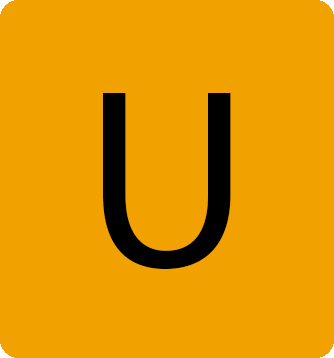
<style>
.page{position:relative;width:334px;height:358px;background:#f1a201}
.page>*{position:absolute;margin:0}
.t1{font:256px "MyriadPro-Regular";color:#000000}
</style>
<div class="page">
<p class="t1" style="left:103px;top:93px;width:128px;height:177px">U</p>
</div>
